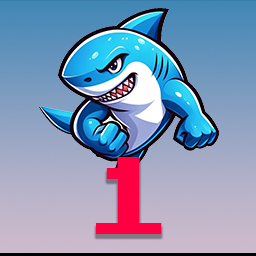
<style>
.page{position:relative;width:256px;height:256px}
.page>*{position:absolute;margin:0}
.t1{font:87.2px "PressStart2P-Regular";color:#fe0042}
</style>
<div class="page">
<p class="t1" style="left:95px;top:157px;width:67px;height:77px">1</p>
</div>
